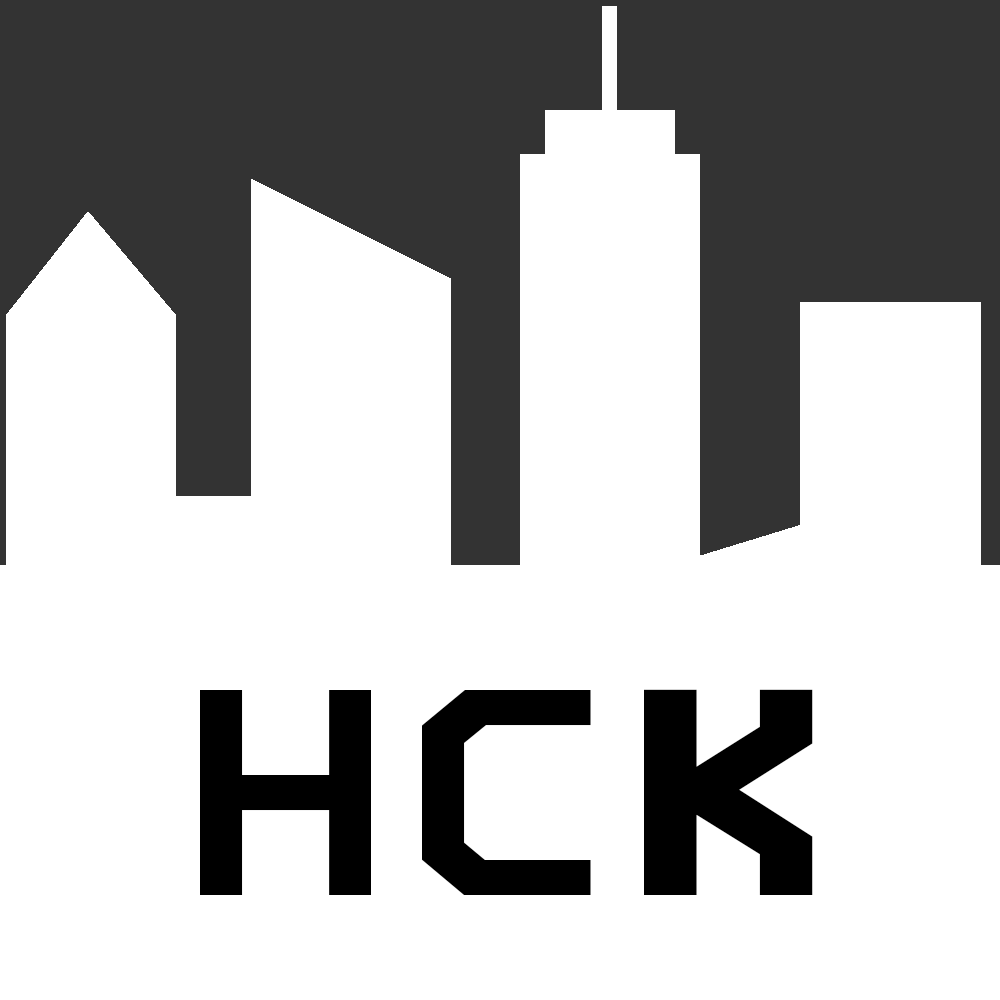
<style>
.page{position:relative;width:1000px;height:1000px;background:#ffffff}
.page>*{position:absolute;margin:0}
.t1{font:250px "WillowBodyCYR";color:#ffffff}
.t2{font:250px "WillowBodyCYR";letter-spacing:0.09em;color:#000000;scale:1.2 1}
.t3{font:250px "WillowBodyCYR";letter-spacing:0.09em;color:#000000;scale:1.5 1}
</style>
<div class="page">
<p class="t1" style="left:200px;top:689px;width:613px;height:206px;text-align:center"><span class="t2">НС</span><span class="t3">К<br><br></span>1<br>СК</p>
</div>
